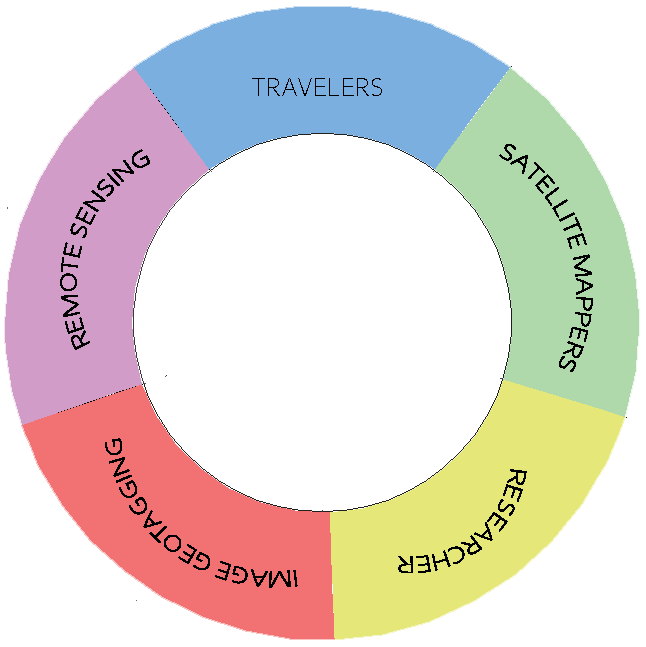
<style>
.page{position:relative;width:646px;height:647px;background:#ffffff}
.page>*{position:absolute;margin:0}
.t1{font:26.7px "CorbelLight";color:#000000}
.t2{font:24px "CorbelLight";color:#000000}
.t3{font:24px "CorbelLight";color:#010000}
</style>
<div class="page">
<p class="t1" style="left:252px;top:78px;width:130px;height:18px">TRAVELERS</p>
<p class="t2" style="left:60px;top:149px;width:90px;height:201px;rotate:-71deg">REMOTE SENSING</p>
<p class="t2" style="left:499px;top:144px;width:94px;height:228px;rotate:74deg">SATELLITE MAPPERS</p>
<p class="t2" style="left:105px;top:438px;width:193px;height:150px;rotate:-143deg">IMAGE GEOTAGGING</p>
<p class="t3" style="left:398px;top:469px;width:129px;height:104px;rotate:141deg">RESEARCHER</p>
</div>
